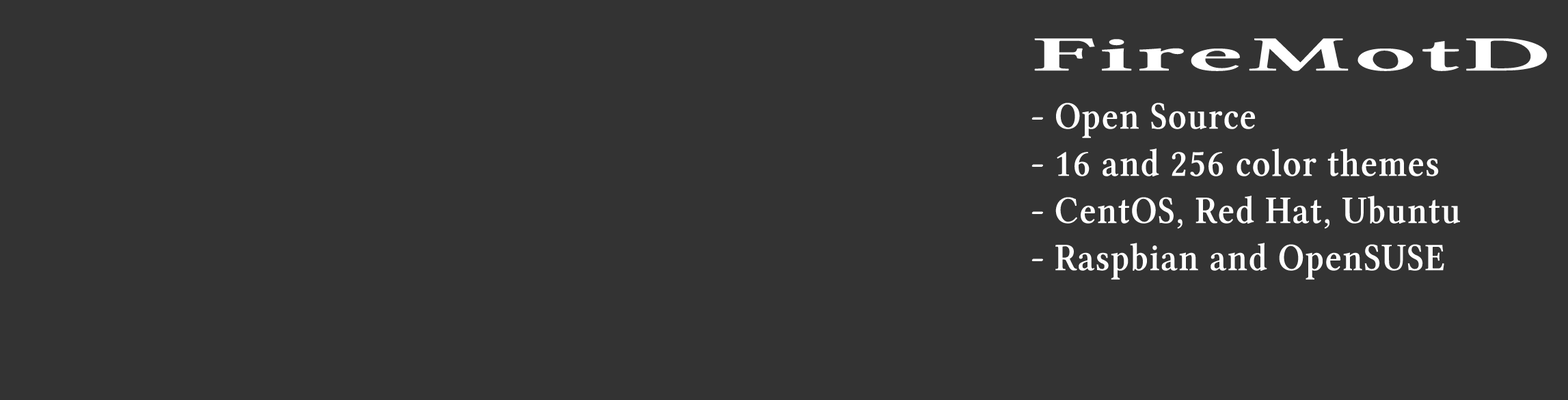
<style>
.page{position:relative;width:1568px;height:400px;background:#333333}
.page>*{position:absolute;margin:0}
.t1{font:49.3px "LinuxLibertineGZ";letter-spacing:0.025em;color:#ffffff;scale:2.48 1}
.t2{font:39.3px "LinuxLibertineGZ";letter-spacing:0.025em;color:#ffffff;scale:0.91 1}
</style>
<div class="page">
<p class="t1" style="left:1034px;top:38px;width:513px;height:33px">FireMotD</p>
<p class="t2" style="left:1031px;top:103px;width:429px;height:177px">- Open Source<br>- 16 and 256 color themes<br>- CentOS, Red Hat, Ubuntu<br>- Raspbian and OpenSUSE</p>
</div>
